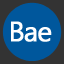
<style>
.page{position:relative;width:64px;height:64px;background:#00579c}
.page>*{position:absolute;margin:0}
.t1{font:26.9px "MalgunGothic";letter-spacing:-0.05em;color:#ffffff;font-weight:bold}
</style>
<div class="page">
<p class="t1" style="left:11px;top:21px;width:41px;height:21px">Bae</p>
</div>
